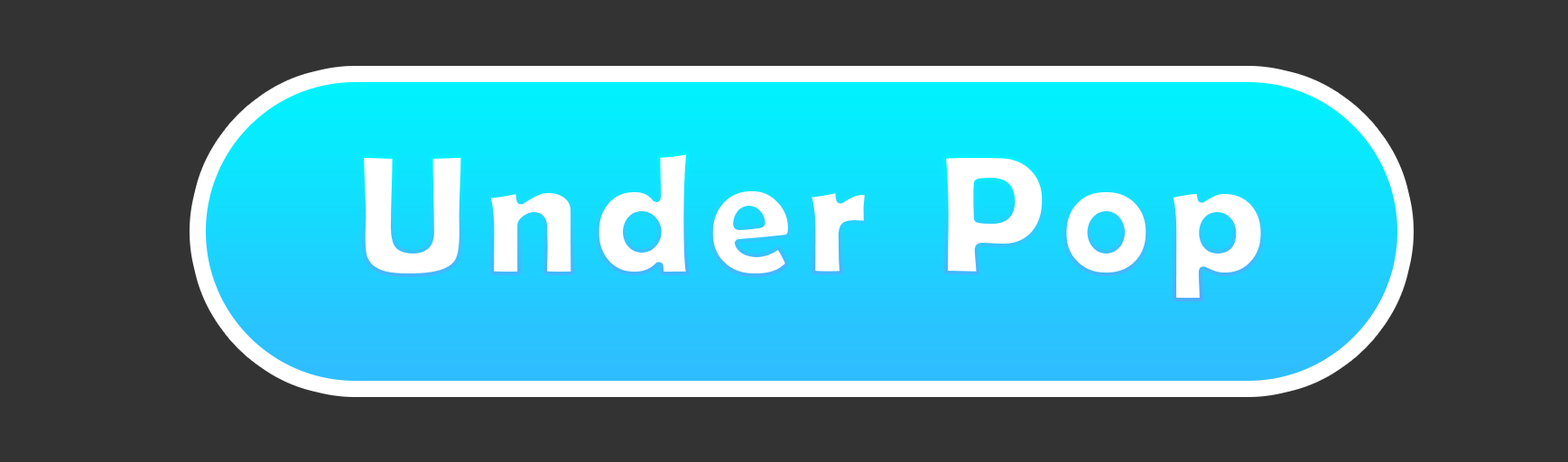
<style>
.page{position:relative;width:1568px;height:462px;background:#333333}
.page>*{position:absolute;margin:0}
.t1{font:175px "BerlinSansFBDemi-Bold";letter-spacing:0.06em;color:#ffffff}
</style>
<div class="page">
<p class="t1" style="left:360px;top:151px;width:905px;height:151px">Under Pop</p>
</div>
